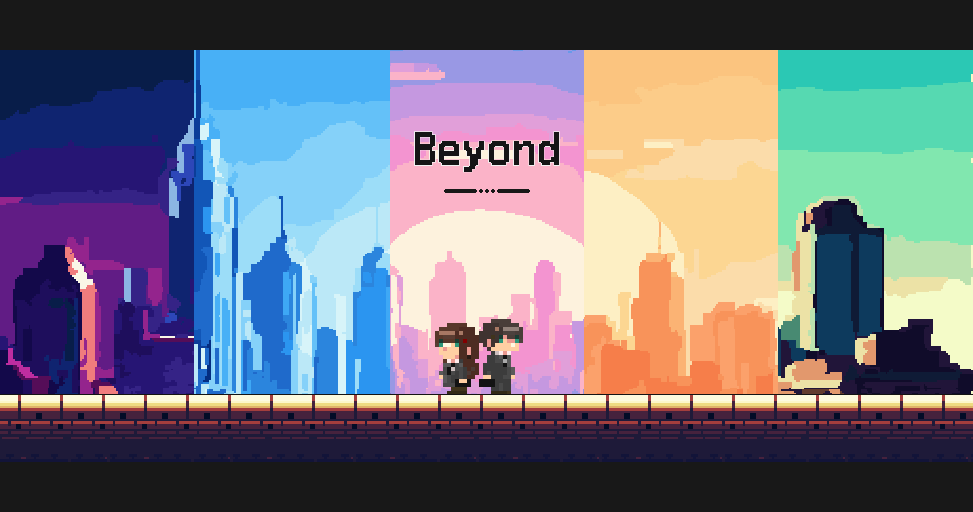
<style>
.page{position:relative;width:973px;height:512px}
.page>*{position:absolute;margin:0}
.t1{font:38px "Galmuri11-Bold";color:#151516}
</style>
<div class="page">
<p class="t1" style="left:414px;top:131px;width:146px;height:42px">Beyond</p>
</div>
